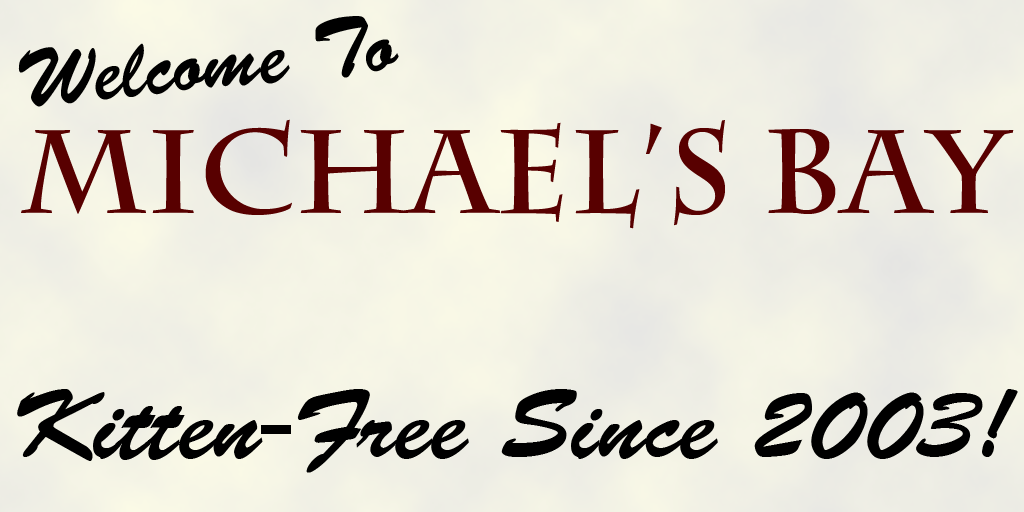
<style>
.page{position:relative;width:1024px;height:512px}
.page>*{position:absolute;margin:0}
.t1{font:82.8px "BanffPlain";color:#000000;scale:0.94 1}
.t2{font:118.7px "CharlemagneStd-Bold";color:#580000}
.t3{font:99.4px "BanffPlain";color:#000000}
</style>
<div class="page">
<p class="t1" style="left:18px;top:16px;width:381px;height:91px;rotate:-6deg">Welcome To</p>
<p class="t2" style="left:21px;top:119px;width:993px;height:110px">Michael’s Bay</p>
<p class="t3" style="left:17px;top:389px;width:1001px;height:84px">Kitten-Free Since 2003!</p>
</div>
